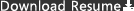
<style>
.page{position:relative;width:134px;height:11px;background:#333333}
.page>*{position:absolute;margin:0}
.t1{font:14px "Segoe";letter-spacing:0.04em;color:#ffffff}
</style>
<div class="page">
<p class="t1" style="left:1px;top:0px;width:120px;height:11px">Download Resume</p>
</div>
